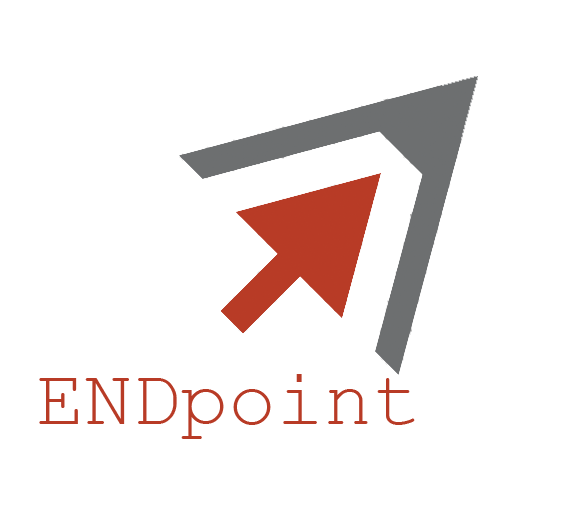
<style>
.page{position:relative;width:582px;height:506px;background:#ffffff}
.page>*{position:absolute;margin:0}
.t1{font:80px "CourierNewPSMT";color:#b83b26}
</style>
<div class="page">
<p class="t1" style="left:39px;top:374px;width:376px;height:65px">ENDpoint</p>
</div>
